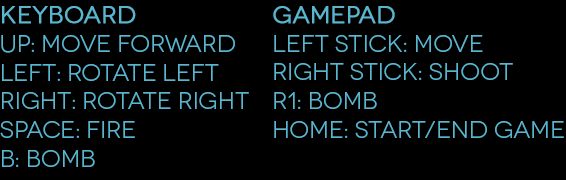
<style>
.page{position:relative;width:566px;height:180px;background:#000000}
.page>*{position:absolute;margin:0}
.t1{font:24px "Novecentowide-Book";color:#5ab6cf}
.t2{font:24px "Novecentowide-Book";color:#5ab6cf;font-weight:bold}
</style>
<div class="page">
<p class="t1" style="left:0px;top:6px;width:249px;height:161px"><span class="t2">Keyboard<br></span>up: move forward<br>left: rotate left<br>right: rotate right<br>space: fire<br>B: bomb</p>
<p class="t1" style="left:273px;top:6px;width:291px;height:132px"><span class="t2">gamepad<br></span>left stick: move<br>right stick: shoot<br>r1: bomb<br>home: start/end game</p>
</div>
